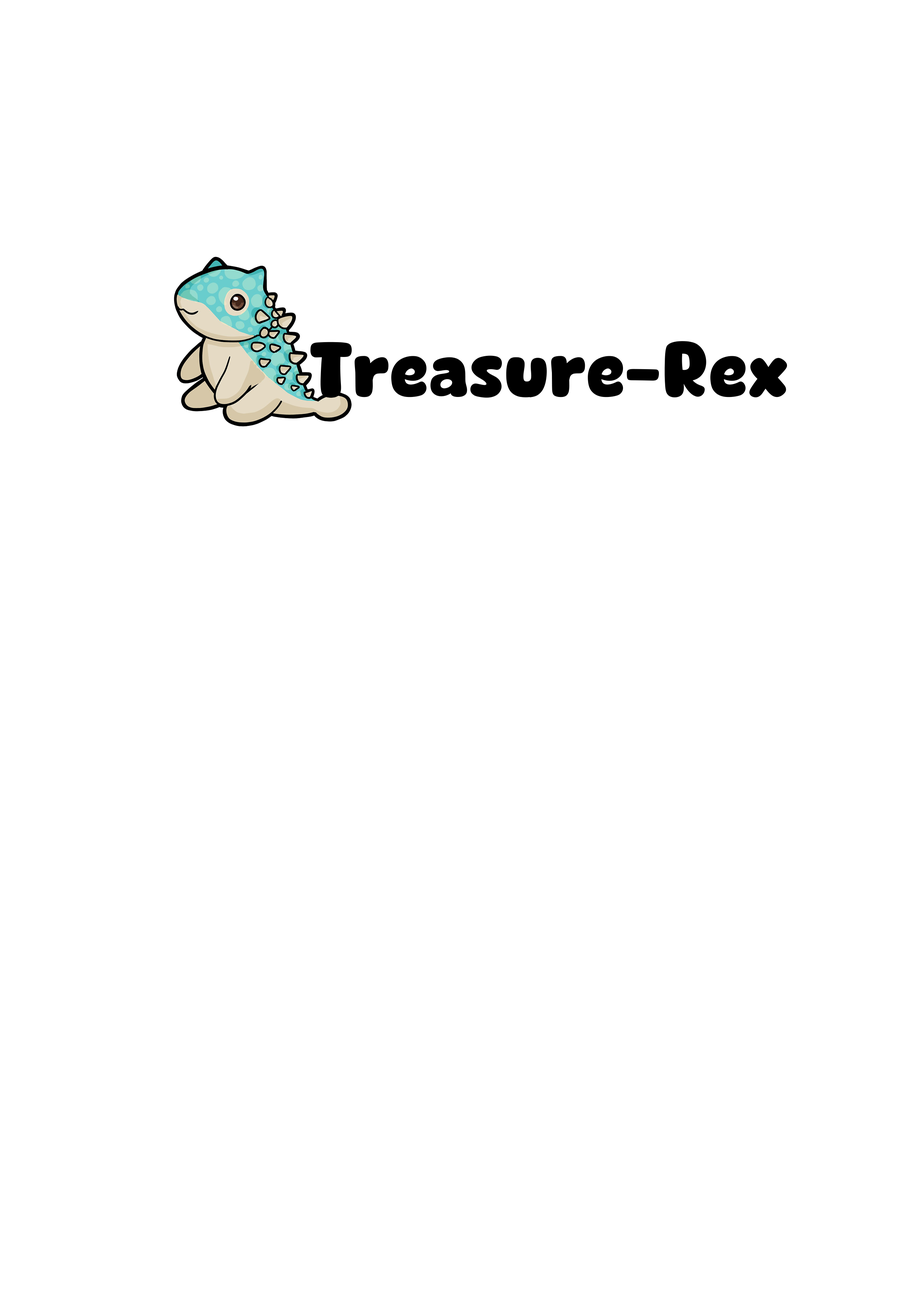
<style>
.page{position:relative;width:918px;height:1299px;background:#ffffff}
.page>*{position:absolute;margin:0}
.t1{font:74px "Cute-Dino";color:#000000}
</style>
<div class="page">
<p class="t1" style="left:310px;top:341px;width:477px;height:57px">Treasure-Rex</p>
</div>
